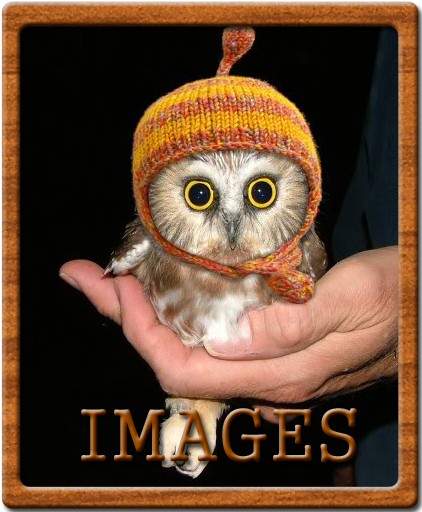
<style>
.page{position:relative;width:422px;height:512px}
.page>*{position:absolute;margin:0}
.t1{font:72px "Gungsuh"}
</style>
<div class="page">
<p class="t1" style="left:81px;top:408px;width:276px;height:55px">IMAGES</p>
</div>
